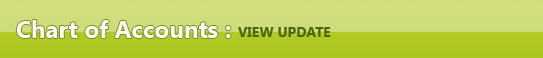
<style>
.page{position:relative;width:543px;height:58px}
.page>*{position:absolute;margin:0}
.t1{font:24px "SegoeUI-Bold";color:#fefefe}
.t2{font:14px "SegoeUI-Bold";color:#4a670c}
</style>
<div class="page">
<p class="t1" style="left:16px;top:20px;width:215px;height:18px">Chart of Accounts :</p>
<p class="t2" style="left:238px;top:27px;width:93px;height:10px">VIEW UPDATE</p>
</div>
